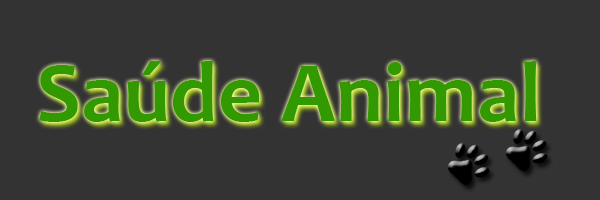
<style>
.page{position:relative;width:600px;height:200px;background:#333333}
.page>*{position:absolute;margin:0}
.t1{font:86.5px "Candara-Bold";color:#339900}
</style>
<div class="page">
<p class="t1" style="left:39px;top:61px;width:498px;height:61px">Saúde Animal</p>
</div>
